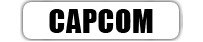
<style>
.page{position:relative;width:203px;height:42px;background:#ffffff}
.page>*{position:absolute;margin:0}
.t1{font:30px "Impact";letter-spacing:0.025em;color:#000000}
</style>
<div class="page">
<p class="t1" style="left:49px;top:9px;width:104px;height:24px">CAPCOM</p>
</div>
